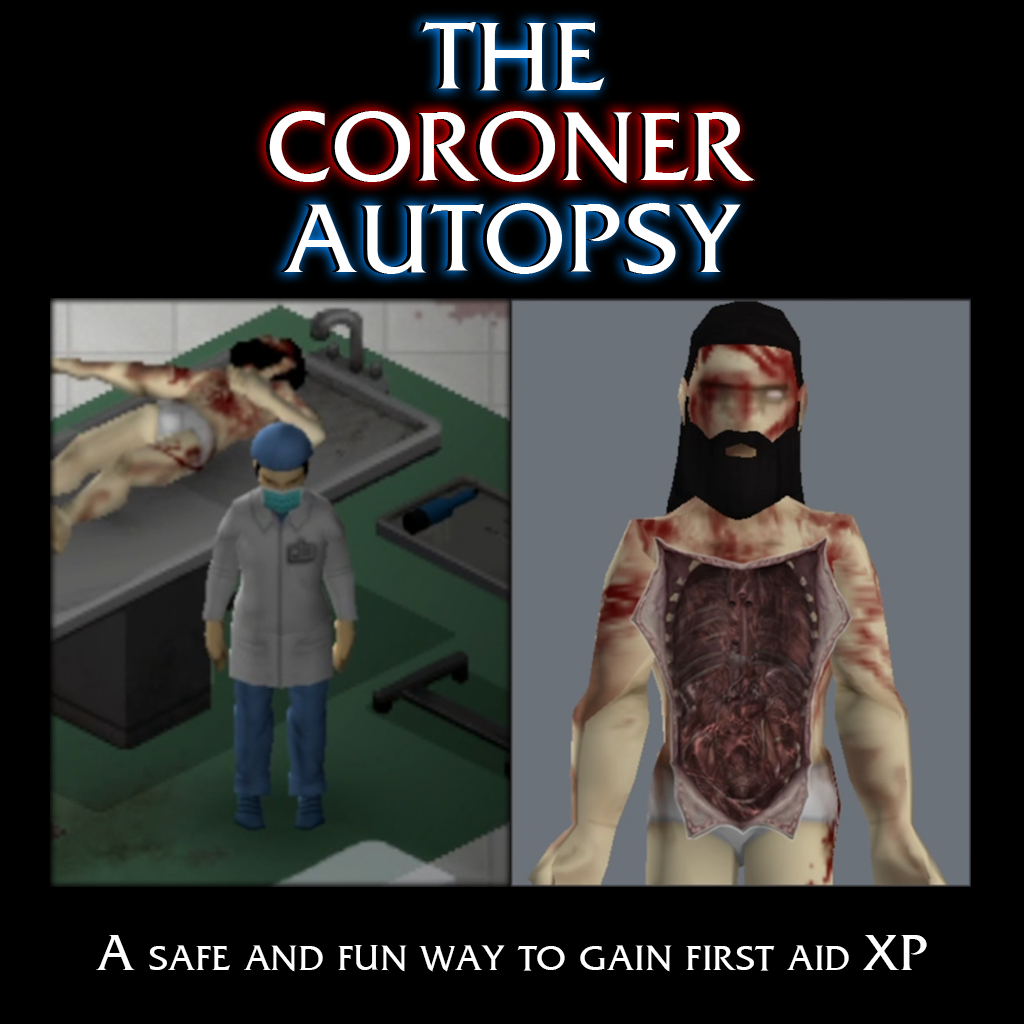
<style>
.page{position:relative;width:1024px;height:1024px;background:#000000}
.page>*{position:absolute;margin:0}
.t1{font:97.1px "FrizQua-ReguOS";color:#ffffff;font-variant:small-caps}
.t2{font:50px "FrizQua-ReguOS";color:#ffffff;font-variant:small-caps}
</style>
<div class="page">
<p class="t1" style="left:422px;top:22px;width:183px;height:69px">THE</p>
<p class="t1" style="left:269px;top:111px;width:486px;height:73px">CORONER</p>
<p class="t1" style="left:283px;top:203px;width:458px;height:71px">AUTOPSY</p>
<p class="t2" style="left:96px;top:935px;width:831px;height:37px">A safe and fun way to gain first aid XP</p>
</div>
